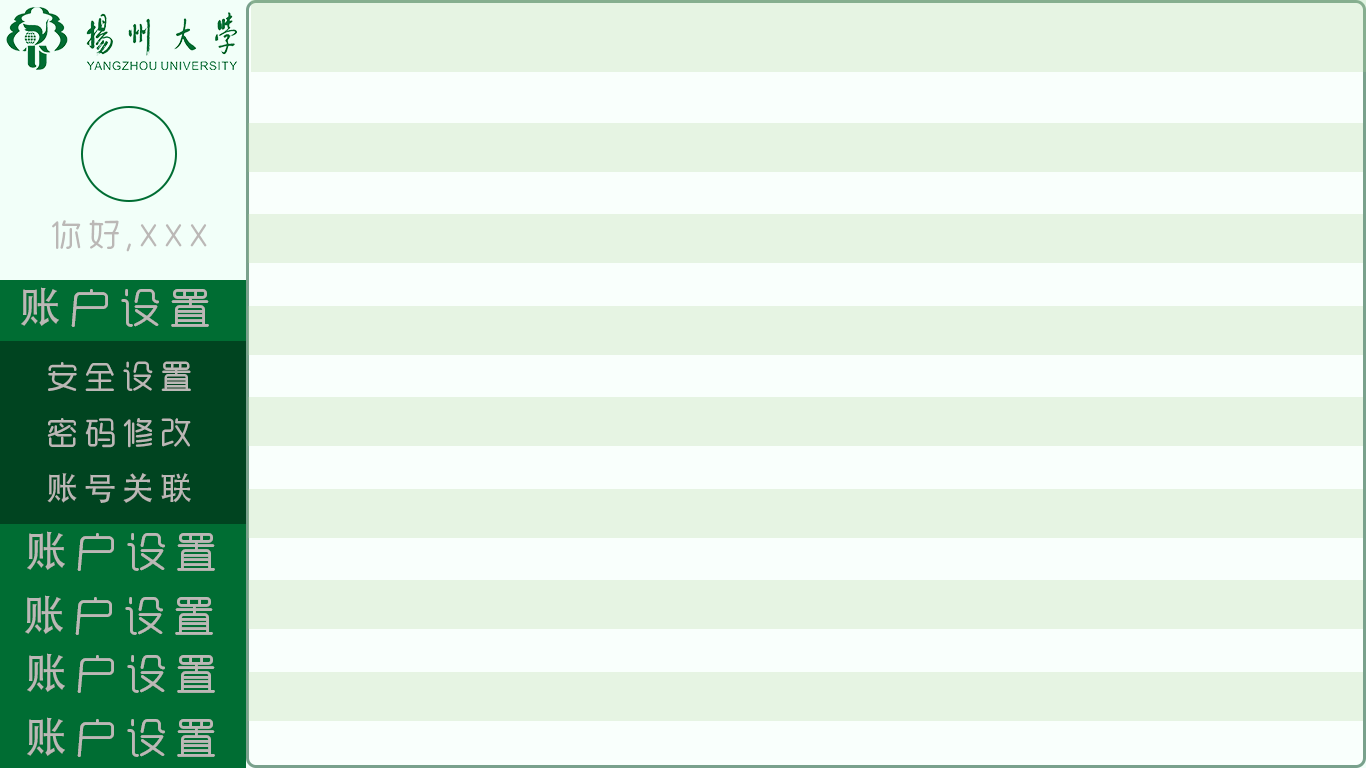
<style>
.page{position:relative;width:1366px;height:768px;background:#e6f4e3}
.page>*{position:absolute;margin:0}
.t1{font:32px "RTWSYueRoudGoDemo-Regular";letter-spacing:0.19em;color:#bbb8b6}
.t2{font:42px "RTWSYueRoudGoDemo-Regular";letter-spacing:0.19em;color:#bbb8b6}
.t3{font:42px "AdobeHeitiStd-Regular";letter-spacing:0.19em;color:#bbb8b6}
.t4{font:32px/56px "RTWSYueRoudGoDemo-Regular";letter-spacing:0.19em;color:#bbb8b6}
.t5{font:32px/56px "AdobeHeitiStd-Regular";letter-spacing:0.19em;color:#bbb8b6}
</style>
<div class="page">
<p class="t1" style="left:52px;top:220px;width:155px;height:32px">你好,XXX</p>
<p class="t2" style="left:21px;top:287px;width:188px;height:40px"><span class="t3">账</span>户设置</p>
<p class="t4" style="left:47px;top:361px;width:144px;height:142px">安全设置<br>密码修改<br><span class="t5">账号关联</span></p>
<p class="t2" style="left:27px;top:531px;width:188px;height:40px"><span class="t3">账</span>户设置</p>
<p class="t2" style="left:25px;top:595px;width:188px;height:40px"><span class="t3">账</span>户设置</p>
<p class="t2" style="left:27px;top:653px;width:188px;height:40px"><span class="t3">账</span>户设置</p>
<p class="t2" style="left:27px;top:717px;width:188px;height:40px"><span class="t3">账</span>户设置</p>
</div>
